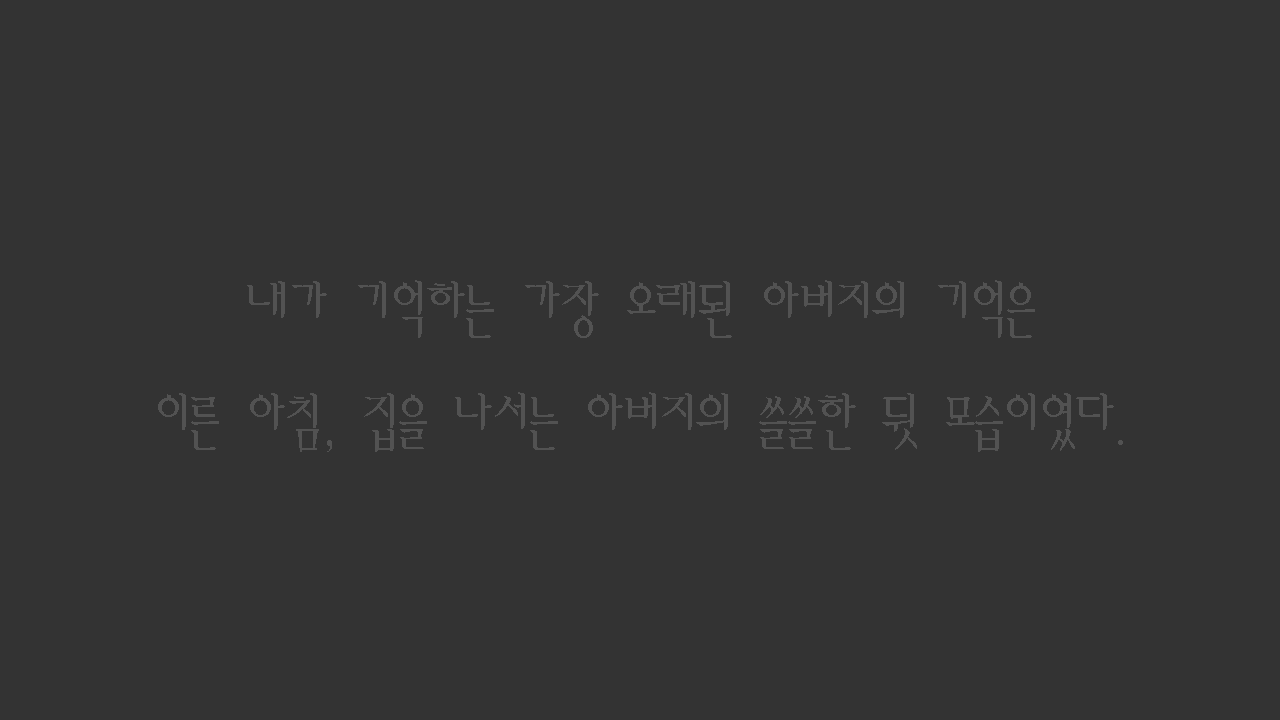
<style>
.page{position:relative;width:1280px;height:720px;background:#333333}
.page>*{position:absolute;margin:0}
.t1{font:64px "AmiR-HM";color:#525252}
</style>
<div class="page">
<p class="t1" style="left:158px;top:280px;width:965px;height:172px;text-align:center">내가 기억하는 가장 오래된 아버지의 기억은<br>이른 아침, 집을 나서는 아버지의 쓸쓸한 뒷 모습이였다.</p>
</div>
